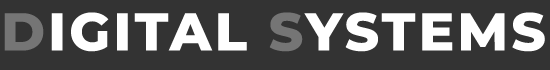
<style>
.page{position:relative;width:550px;height:70px;background:#333333}
.page>*{position:absolute;margin:0}
.t1{font:53.1px "Montserrat-ExtraBold";letter-spacing:0.06em;color:#ffffff}
.t2{font:53.1px "Montserrat-ExtraBold";letter-spacing:0.06em;color:#757575}
</style>
<div class="page">
<p class="t1" style="left:4px;top:12px;width:541px;height:40px"><span class="t2">D</span>IGITAL <span class="t2">S</span>YSTEMS</p>
</div>
